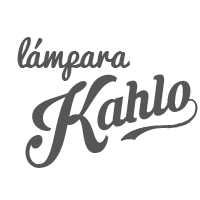
<style>
.page{position:relative;width:200px;height:200px;background:#ffffff}
.page>*{position:absolute;margin:0}
.t1{font:34.8px "Pacifico";color:#565656}
.t2{font:71.9px "KrinkesDecorPERSONALUSE";color:#565656}
.t3{font:44px "CANDYINC";color:#565656;scale:0.9 1}
</style>
<div class="page">
<p class="t1" style="left:17px;top:37px;width:113px;height:44px">lámpara</p>
<p class="t2" style="left:25px;top:74px;width:166px;height:94px;rotate:-15deg">Kahlo</p>
<p class="t3" style="left:120px;top:99px;width:78px;height:42px;rotate:-17deg">{</p>
</div>
